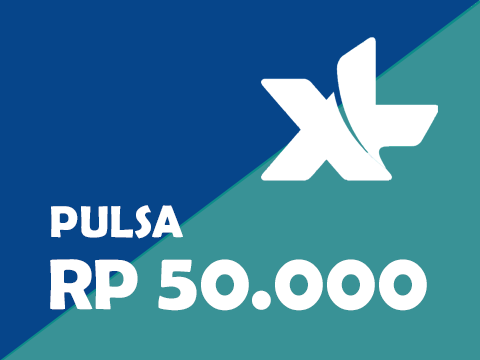
<style>
.page{position:relative;width:480px;height:360px;background:#06458a}
.page>*{position:absolute;margin:0}
.t1{font:45px "BerlinSansFBDemi-Bold";color:#ffffff}
.t2{font:82px "BerlinSansFBDemi-Bold";color:#ffffff}
.t3{font:72px "BerlinSansFBDemi-Bold";color:#ffffff}
</style>
<div class="page">
<p class="t1" style="left:51px;top:205px;width:132px;height:34px">PULSA</p>
<p class="t2" style="left:50px;top:259px;width:377px;height:52px"><span class="t3">RP </span>50.000</p>
</div>
